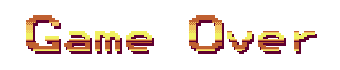
<style>
.page{position:relative;width:340px;height:70px;background:#ffffff}
.page>*{position:absolute;margin:0}
.t1{font:40.4px "ModeSeven"}
.t2{font:50.5px "ModeSeven"}
</style>
<div class="page">
<p class="t1" style="left:26px;top:15px;width:289px;height:36px"><span class="t2">G</span>ame <span class="t2">O</span>ver</p>
<p class="t1" style="left:28px;top:18px;width:289px;height:36px"><span class="t2">G</span>ame <span class="t2">O</span>ver</p>
</div>
